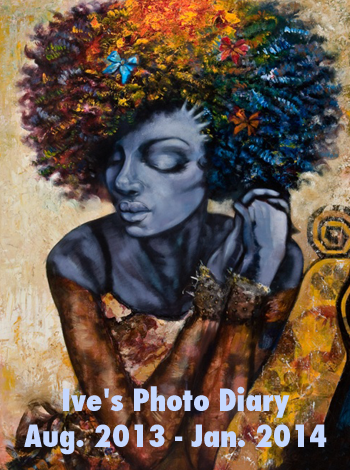
<style>
.page{position:relative;width:350px;height:470px}
.page>*{position:absolute;margin:0}
.t1{font:30px "Futura-CondensedExtraBold";color:#c4d7fe}
</style>
<div class="page">
<p class="t1" style="left:24px;top:386px;width:303px;height:69px;text-align:center">Ive's Photo Diary<br>Aug. 2013 - Jan. 2014</p>
</div>
